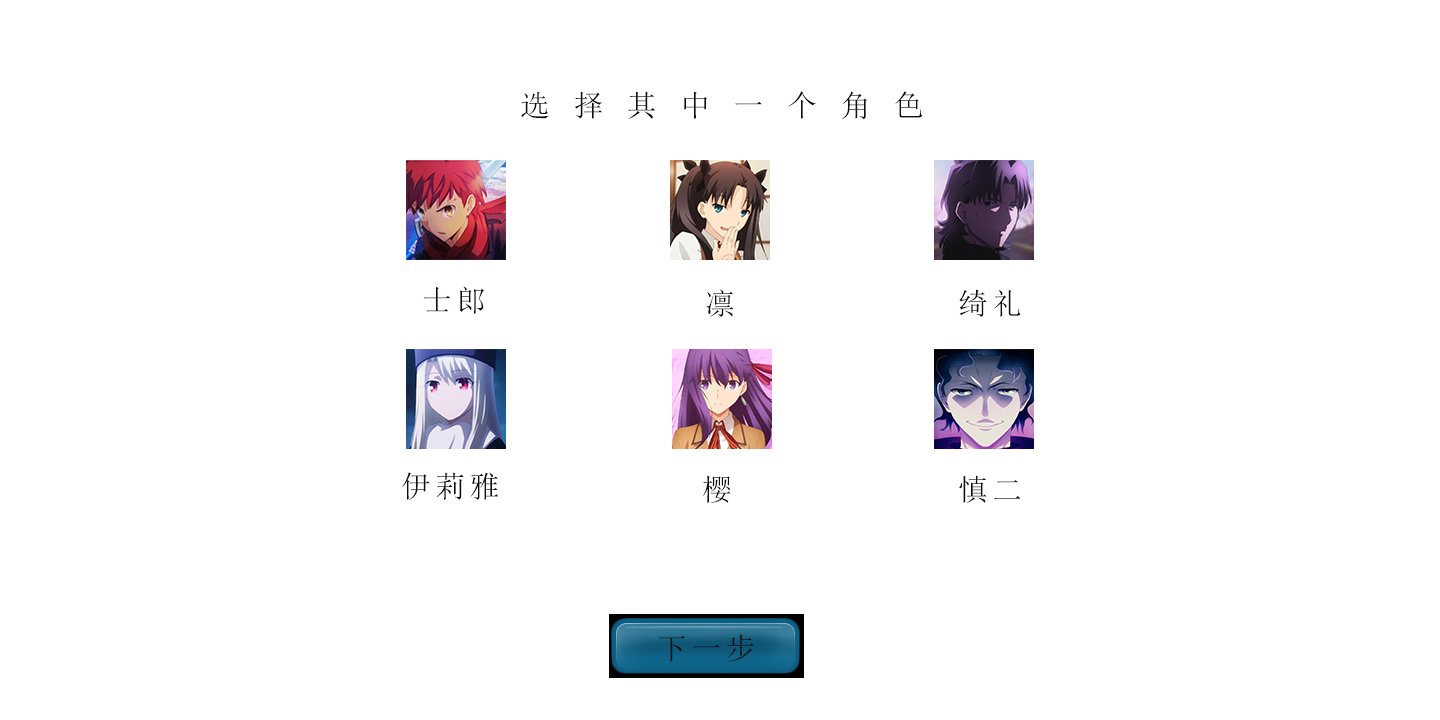
<style>
.page{position:relative;width:1440px;height:720px;background:#ffffff}
.page>*{position:absolute;margin:0}
.t1{font:30px "SimSun";letter-spacing:0.14em;color:#0f0e0f;text-transform:uppercase}
</style>
<div class="page">
<p class="t1" style="left:521px;top:91px;width:402px;height:29px">选 择 其 中 一 个 角 色</p>
<p class="t1" style="left:423px;top:286px;width:62px;height:28px">士郎</p>
<p class="t1" style="left:706px;top:289px;width:28px;height:28px">凛</p>
<p class="t1" style="left:959px;top:289px;width:62px;height:28px">绮礼</p>
<p class="t1" style="left:402px;top:472px;width:97px;height:28px">伊莉雅</p>
<p class="t1" style="left:703px;top:475px;width:28px;height:28px">樱</p>
<p class="t1" style="left:959px;top:475px;width:62px;height:28px">慎二</p>
<p class="t1" style="left:659px;top:634px;width:95px;height:28px">下一步</p>
</div>
